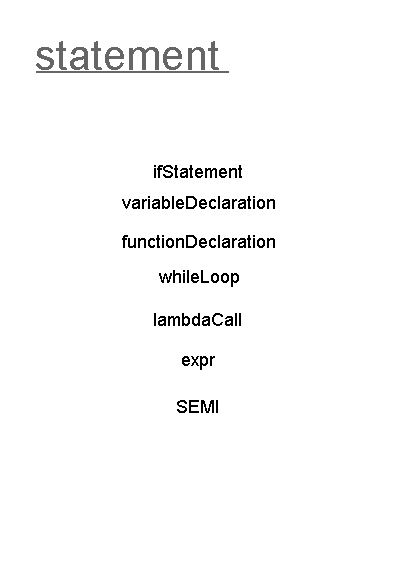
<style>
.page{position:relative;width:396px;height:576px;background:#ffffff}
.page>*{position:absolute;margin:0}
.t1{font:42px "ArialMT";color:#666666}
.t2{font:18px "ArialMT";color:#000000}
</style>
<div class="page">
<p class="t1" style="left:36px;top:41px;width:183px;height:29px">statement</p>
<p class="t2" style="left:154px;top:165px;width:88px;height:13px">ifStatement</p>
<p class="t2" style="left:122px;top:196px;width:153px;height:13px">variableDeclaration</p>
<p class="t2" style="left:122px;top:235px;width:153px;height:13px">functionDeclaration</p>
<p class="t2" style="left:159px;top:270px;width:80px;height:17px">whileLoop</p>
<p class="t2" style="left:154px;top:313px;width:87px;height:13px">lambdaCall</p>
<p class="t2" style="left:182px;top:356px;width:33px;height:14px">expr</p>
<p class="t2" style="left:177px;top:400px;width:41px;height:13px">SEMI</p>
</div>
